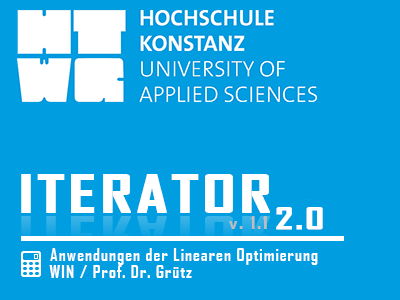
<style>
.page{position:relative;width:400px;height:300px;background:#009de0}
.page>*{position:absolute;margin:0}
.t1{font:50px "AgencyFB-Bold";letter-spacing:0.05em;color:#ffffff;text-transform:uppercase;font-weight:bold;scale:1.33 1}
.t2{font:50px "AgencyFB-Bold";letter-spacing:0.05em;color:#ffffff;font-weight:bold;scale:1.33 1}
.t3{font:30px "AgencyFB-Bold";letter-spacing:0.05em;color:#bebebe;scale:1.33 1}
.t4{font:30px "AgencyFB-Bold";letter-spacing:0.05em;color:#ffffff}
</style>
<div class="page">
<p class="t1" style="left:21px;top:174px;width:302px;height:56px">Iterator<span class="t2">2.0</span></p>
<p class="t3" style="left:229px;top:216px;width:38px;height:13px">v. 1.1</p>
<p class="t4" style="left:50px;top:248px;width:268px;height:17px">Anwendungen der Linearen Optimierung</p>
<p class="t4" style="left:49px;top:265px;width:143px;height:13px">WIN / Prof. Dr. Grütz</p>
</div>
